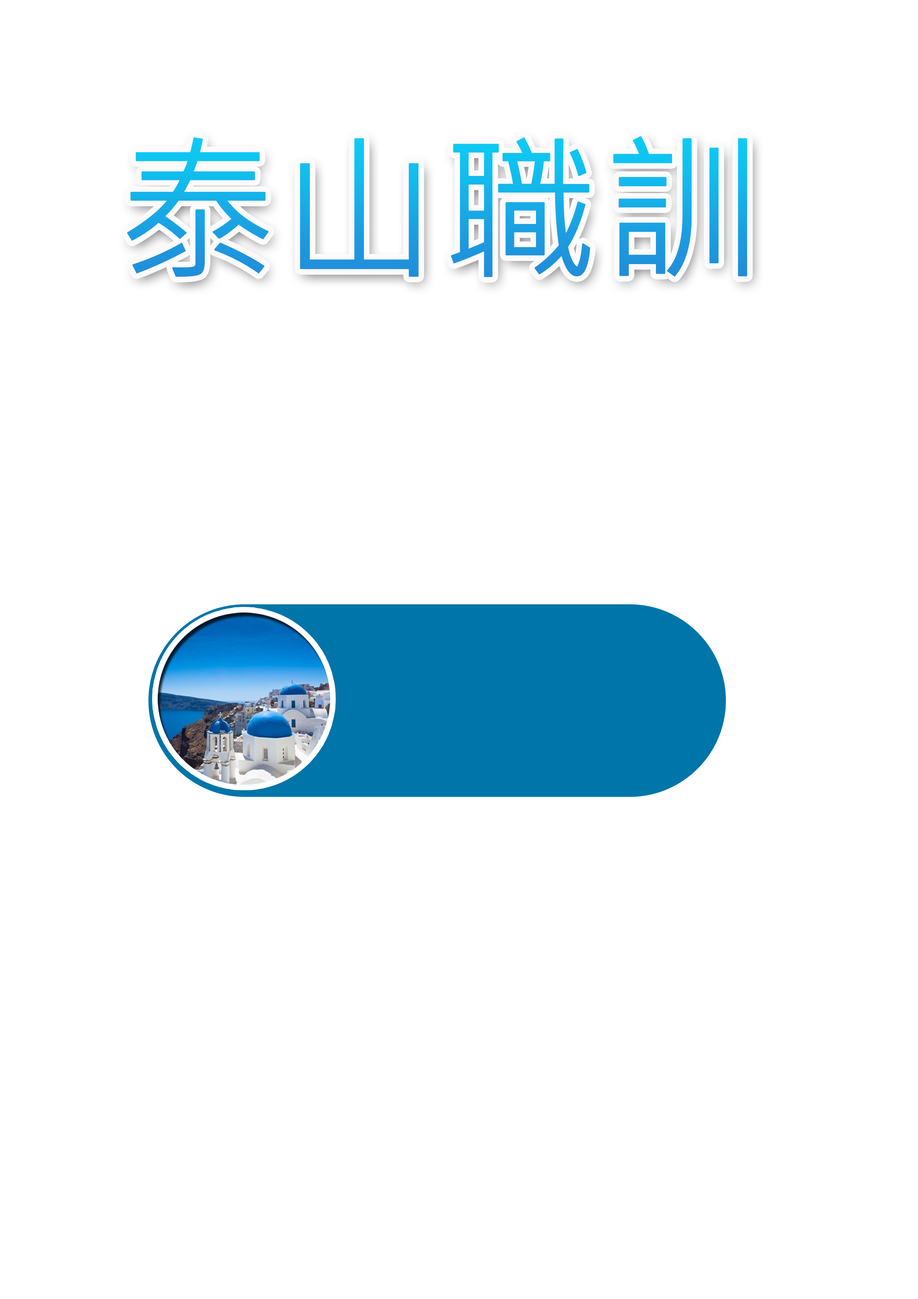
<style>
.page{position:relative;width:918px;height:1299px;background:#ffffff}
.page>*{position:absolute;margin:0}
.t1{font:157.3px "MicrosoftJhengHeiRegular";font-weight:bold}
</style>
<div class="page">
<p class="t1" style="left:127px;top:136px;width:620px;height:141px">泰山職訓</p>
</div>
